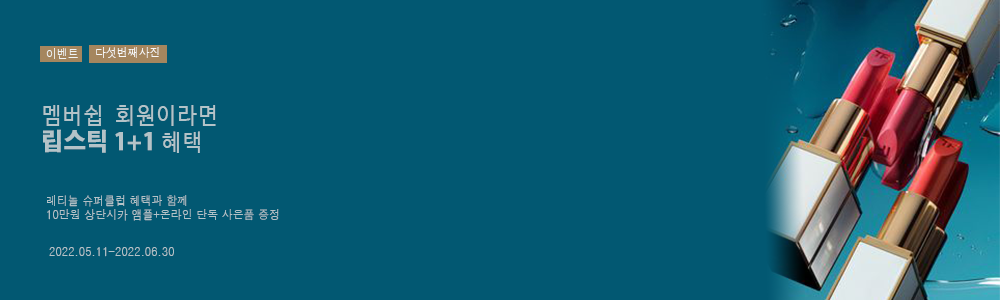
<style>
.page{position:relative;width:1000px;height:300px;background:#025872}
.page>*{position:absolute;margin:0}
.t1{font:12px "Haansoft-Dotum";letter-spacing:0.01em;color:#eff4f5;text-transform:uppercase;scale:0.9 1}
.t2{font:12px "Haansoft-Dotum";letter-spacing:0.01em;color:#f7f9fa;text-transform:uppercase;scale:0.9 1}
.t3{font:23px/26.8px "D2Codingligature";letter-spacing:0.01em;color:#b4c3c8;text-transform:uppercase;scale:0.9 1}
.t4{font:24px/26.8px "AdobeGothicStd-Bold";letter-spacing:0.01em;color:#b4c3c8;text-transform:uppercase;font-weight:bold;scale:0.9 1}
.t5{font:12px/14px "Haansoft-Dotum";letter-spacing:0.01em;color:#b4c3c8;text-transform:uppercase;scale:0.9 1}
.t6{font:12px "Haansoft-Dotum";letter-spacing:0.01em;color:#b4c3c8;text-transform:uppercase;scale:0.9 1}
</style>
<div class="page">
<p class="t1" style="left:46px;top:48px;width:32px;height:11px">이벤트</p>
<p class="t2" style="left:96px;top:47px;width:63px;height:11px">다섯번째사진</p>
<p class="t3" style="left:43px;top:105px;width:173px;height:48px">멤버쉽 회원이라면<br><span class="t4">립스틱 1+1 </span>혜택</p>
<p class="t5" style="left:47px;top:195px;width:232px;height:26px">레티놀 슈퍼클럽 혜택과 함께<br>10만원 상단시카 앰플+온라인 단독 사은품 증정</p>
<p class="t6" style="left:49px;top:247px;width:125px;height:10px">2022.05.11-2022.06.30</p>
</div>
